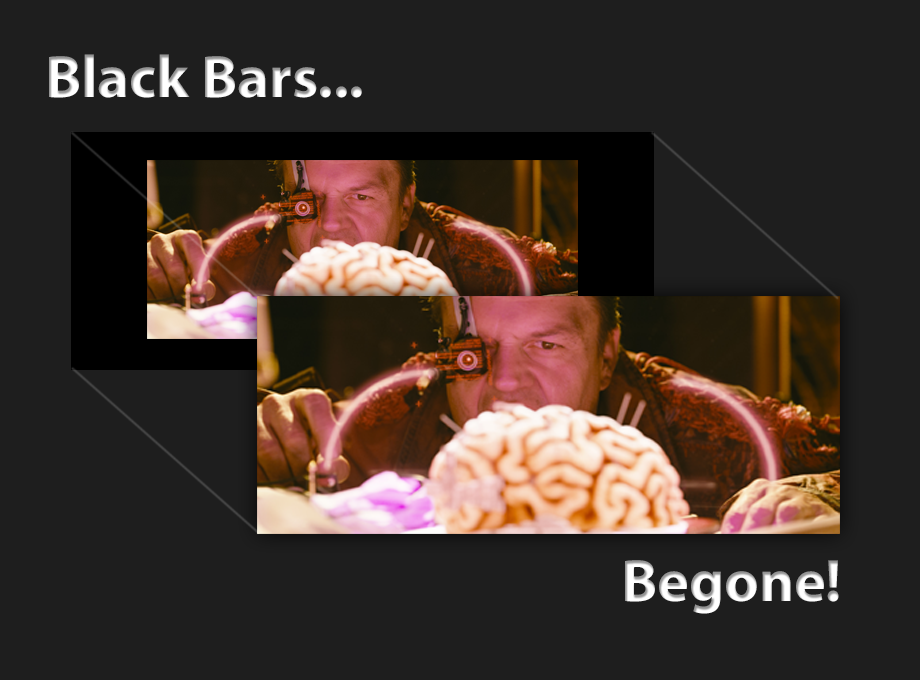
<style>
.page{position:relative;width:920px;height:680px;background:#1e1e1e}
.page>*{position:absolute;margin:0}
.t1{font:60px "MyriadPro-Bold"}
</style>
<div class="page">
<p class="t1" style="left:49px;top:54px;width:790px;height:560px">Black Bars...           <br><br><br><br><br>          <br>           <br>                Begone!</p>
</div>
